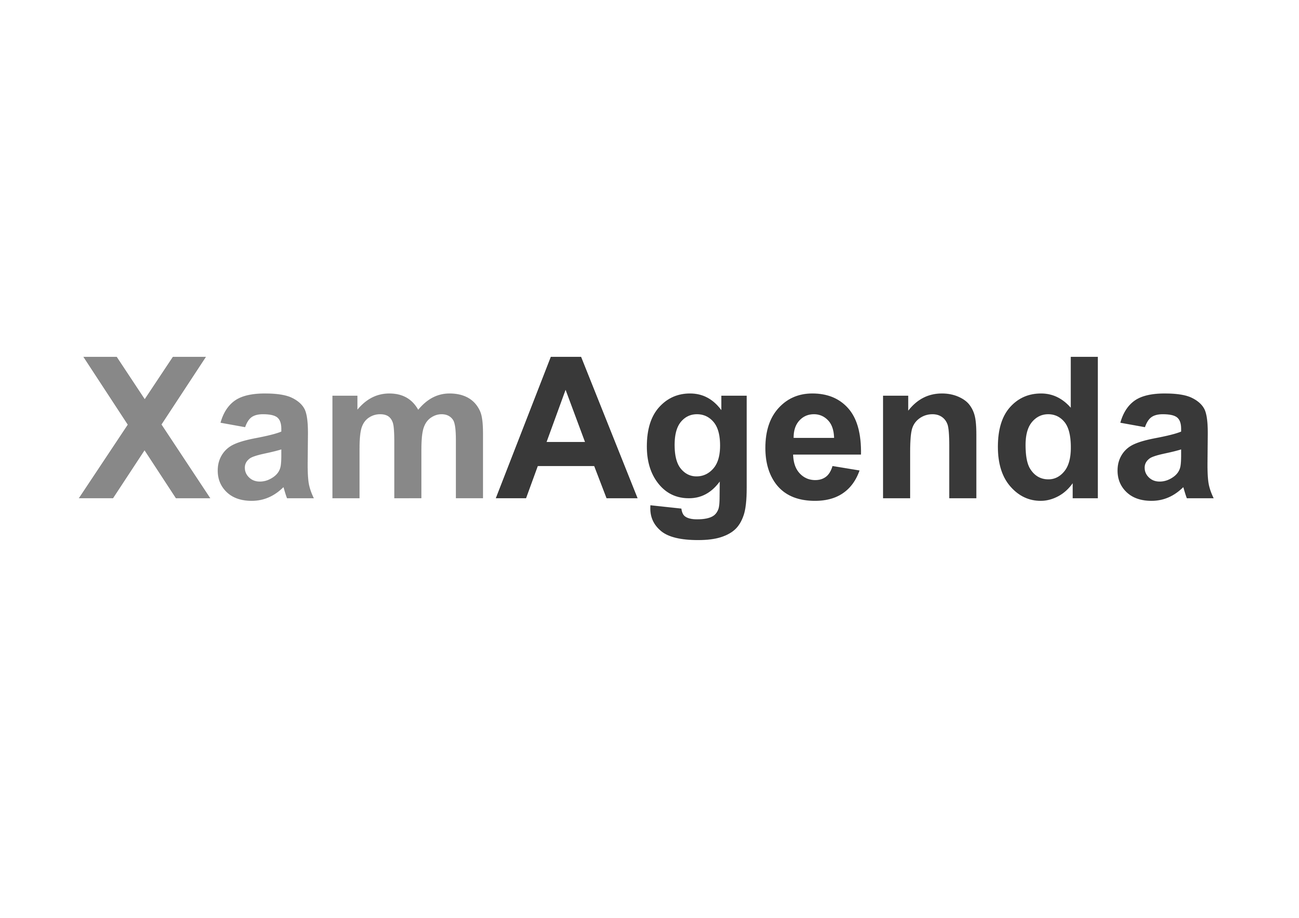
<style>
.page{position:relative;width:1299px;height:918px;background:#ffffff}
.page>*{position:absolute;margin:0}
.t1{font:197.5px "Arial-BoldMT";color:#393939}
.t2{font:197.5px "Arial-BoldMT";color:#888888}
</style>
<div class="page">
<p class="t1" style="left:78px;top:357px;width:1136px;height:183px"><span class="t2">Xam</span>Agenda</p>
</div>
